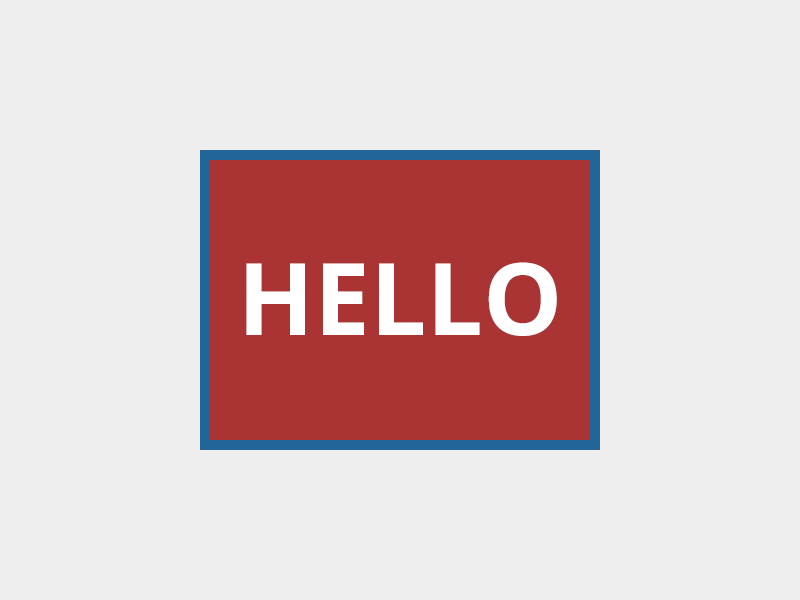
<style>
.page{position:relative;width:800px;height:600px;background:#eeeeee}
.page>*{position:absolute;margin:0}
.t1{font:100px "OpenSans-Bold";color:#ffffff}
</style>
<div class="page">
<p class="t1" style="left:246px;top:262px;width:311px;height:74px">HELLO</p>
</div>
